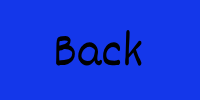
<style>
.page{position:relative;width:200px;height:100px;background:#1437ea}
.page>*{position:absolute;margin:0}
.t1{font:48.6px "Dekko";color:#000000}
</style>
<div class="page">
<p class="t1" style="left:56px;top:30px;width:86px;height:36px">Back</p>
</div>
